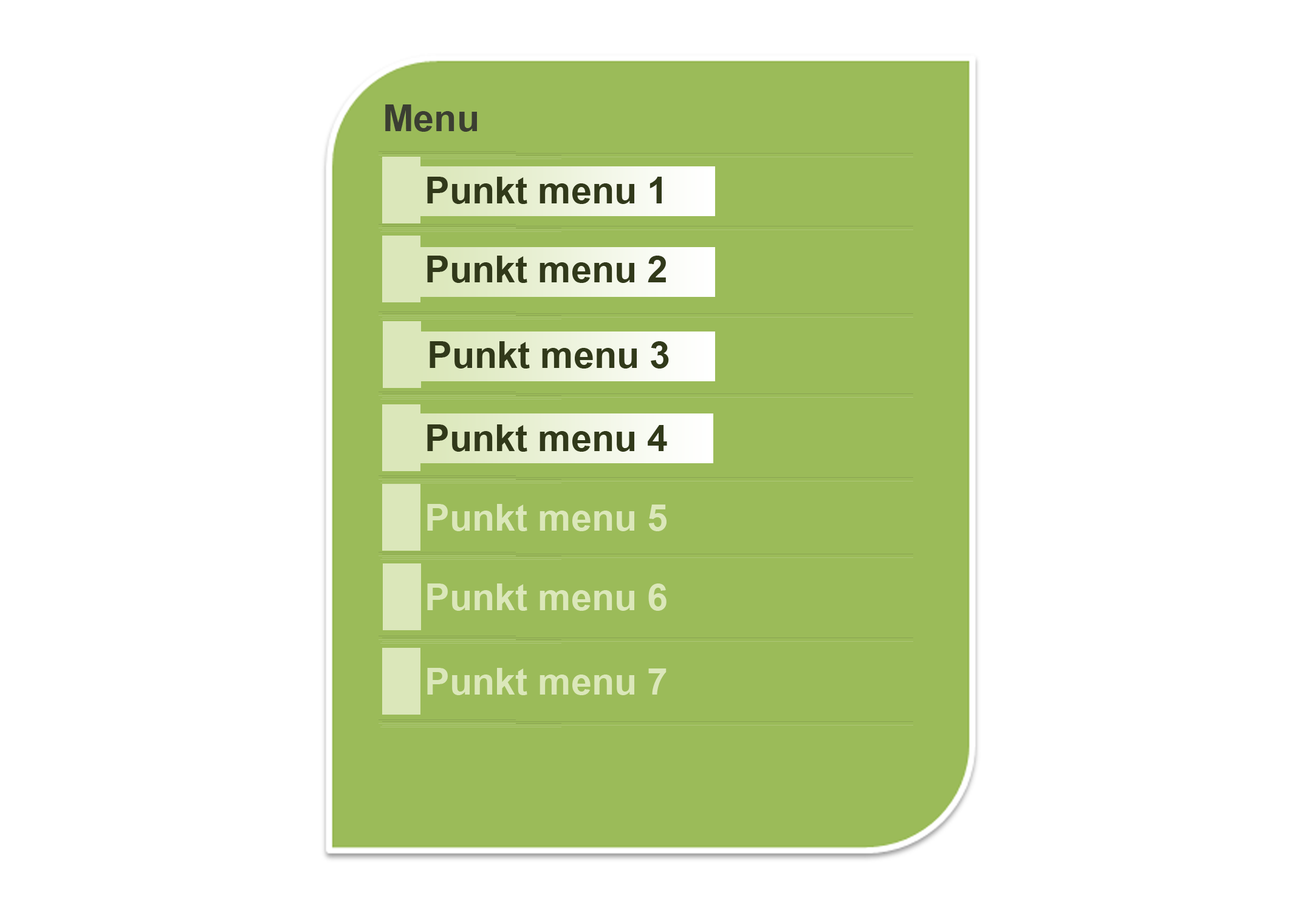
<style>
.page{position:relative;width:1299px;height:918px;background:#ffffff}
.page>*{position:absolute;margin:0}
.t1{font:37px "Arial-BoldMT";color:#3b3e32}
.t2{font:37px "Arial-BoldMT";color:#31391a}
.t3{font:37px "Arial-BoldMT";color:#dbe7ba}
</style>
<div class="page">
<p class="t1" style="left:385px;top:104px;width:92px;height:28px">Menu</p>
<p class="t2" style="left:427px;top:177px;width:234px;height:27px">Punkt menu 1</p>
<p class="t2" style="left:427px;top:256px;width:239px;height:27px">Punkt menu 2</p>
<p class="t2" style="left:429px;top:341px;width:240px;height:28px">Punkt menu 3</p>
<p class="t2" style="left:427px;top:425px;width:240px;height:27px">Punkt menu 4</p>
<p class="t3" style="left:427px;top:504px;width:239px;height:27px">Punkt menu 5</p>
<p class="t3" style="left:427px;top:584px;width:239px;height:27px">Punkt menu 6</p>
<p class="t3" style="left:427px;top:668px;width:239px;height:27px">Punkt menu 7</p>
</div>
